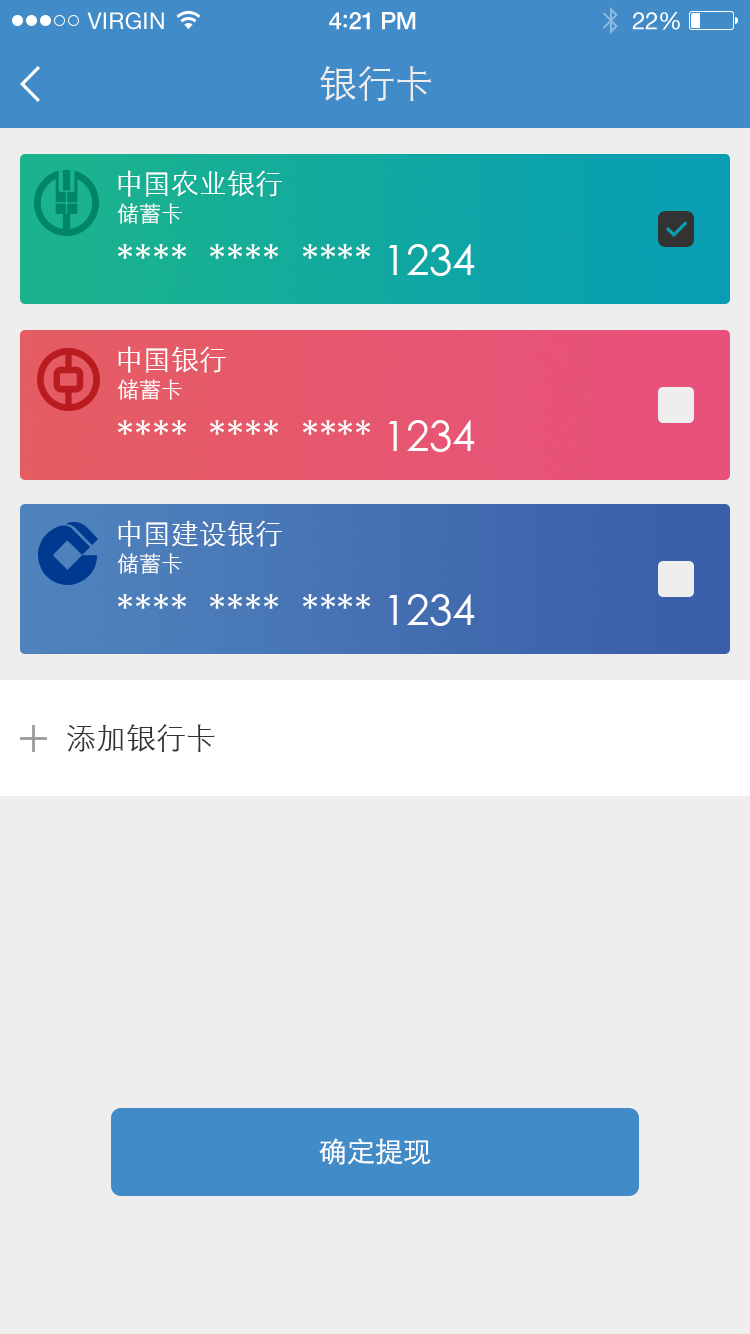
<style>
.page{position:relative;width:750px;height:1334px;background:#eeeeee}
.page>*{position:absolute;margin:0}
.t1{font:23px "HelveticaNeue";letter-spacing:0.02em;color:#ffffff}
.t2{font:24px "HelveticaNeue-Medium";letter-spacing:-0.02em;color:#ffffff}
.t3{font:26px "Avenir-Medium";letter-spacing:-0.02em;color:#ffffff}
.t4{font:24px "HelveticaNeue";letter-spacing:-0.02em;color:#ffffff}
.t5{font:38px "STXihei";color:#eeeeee}
.t6{font:28px "STXihei";color:#ffffff}
.t7{font:22px "STXihei";color:#ffffff}
.t8{font:42px "STXihei";color:#ffffff}
.t9{font:30px "STXihei";color:#333333}
</style>
<div class="page">
<p class="t1" style="left:87px;top:12px;width:77px;height:18px">VIRGIN</p>
<p class="t2" style="left:329px;top:12px;width:87px;height:18px">4<span class="t3">:</span>21 PM</p>
<p class="t4" style="left:632px;top:12px;width:48px;height:18px">22%</p>
<p class="t5" style="left:320px;top:66px;width:111px;height:35px">银行卡</p>
<p class="t6" style="left:118px;top:170px;width:164px;height:27px">中国农业银行</p>
<p class="t7" style="left:117px;top:203px;width:65px;height:21px">储蓄卡</p>
<p class="t8" style="left:118px;top:244px;width:357px;height:32px">****  ****  **** 1234</p>
<p class="t6" style="left:118px;top:346px;width:108px;height:27px">中国银行</p>
<p class="t7" style="left:117px;top:379px;width:65px;height:21px">储蓄卡</p>
<p class="t8" style="left:118px;top:420px;width:357px;height:32px">****  ****  **** 1234</p>
<p class="t6" style="left:118px;top:520px;width:164px;height:27px">中国建设银行</p>
<p class="t7" style="left:117px;top:553px;width:65px;height:21px">储蓄卡</p>
<p class="t8" style="left:118px;top:594px;width:357px;height:32px">****  ****  **** 1234</p>
<p class="t9" style="left:67px;top:724px;width:148px;height:28px">添加银行卡</p>
<p class="t6" style="left:319px;top:1138px;width:112px;height:27px">确定提现</p>
</div>
